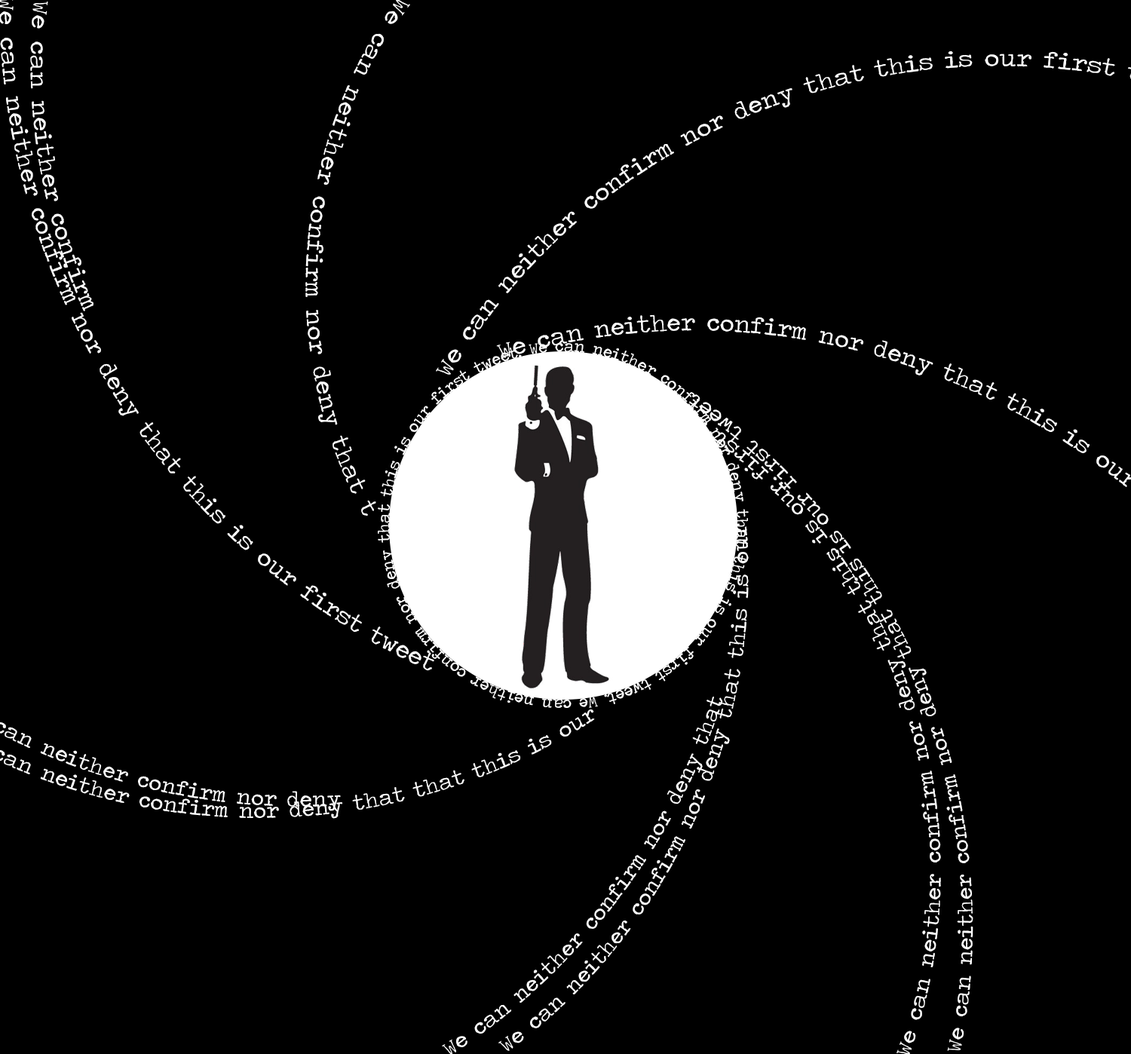
<style>
.page{position:relative;width:1131px;height:1054px;background:#000000}
.page>*{position:absolute;margin:0}
.t1{font:23.4px "TravelingTypewriter";color:#ffffff}
.t2{font:21.1px "TravelingTypewriter";color:#ffffff}
</style>
<div class="page">
<p class="t1" style="left:30px;top:2px;width:64px;height:309px;rotate:63deg">We can neither confirm</p>
<p class="t1" style="left:305px;top:0px;width:105px;height:517px;rotate:93deg">We can neither confirm nor deny that t</p>
<p class="t2" style="left:689px;top:394px;width:285px;height:657px;rotate:-112deg">We can neither confirm nor deny that this is our first tweet</p>
<p class="t2" style="left:442px;top:696px;width:281px;height:359px;rotate:-66deg">We can neither confirm nor deny that</p>
</div>
